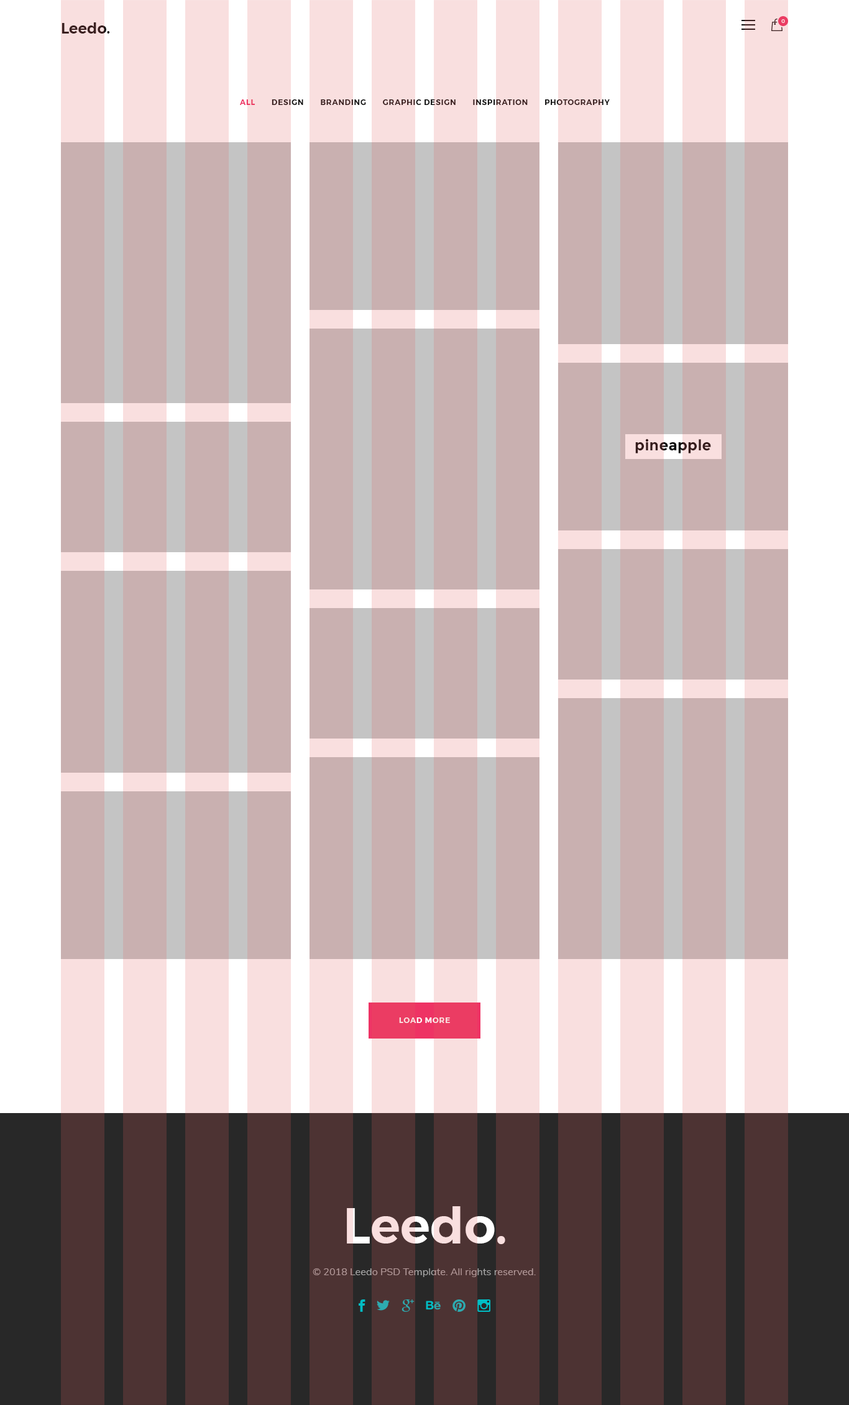
<style>
.page{position:relative;width:849px;height:1405px;background:#c9b0b0}
.page>*{position:absolute;margin:0}
.t1{font:14.9px "Montserrat-SemiBold";color:#3a2020}
.t2{font:5px "Montserrat-Medium";letter-spacing:0.05em;color:#f9dfdf;text-transform:uppercase}
.t3{font:7.5px "Montserrat-SemiBold";letter-spacing:0.075em;text-transform:uppercase}
.t4{font:14.9px "Montserrat-Bold";letter-spacing:0.01em;color:#351c1c}
.t5{font:49.7px "Montserrat-SemiBold";color:#f9dfdf}
.t6{font:9.9px "Muli-Regular";color:#a7a7a7}
</style>
<div class="page">
<p class="t1" style="left:62px;top:22px;width:48px;height:12px">Leedo.</p>
<p class="t2" style="left:781px;top:19px;width:4px;height:4px">0</p>
<p class="t3" style="left:240px;top:99px;width:369px;height:6px">all       design       branding       graphic design       inspiration       photography</p>
<p class="t4" style="left:635px;top:439px;width:76px;height:14px">pineapple</p>
<p class="t3" style="left:399px;top:1018px;width:51px;height:5px">load more</p>
<p class="t5" style="left:347px;top:1206px;width:158px;height:38px">Leedo.</p>
<p class="t6" style="left:312px;top:1269px;width:223px;height:8px">© 2018 Leedo PSD Template. All rights reserved.</p>
</div>
